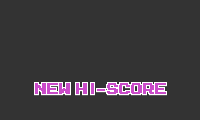
<style>
.page{position:relative;width:200px;height:120px;background:#333333}
.page>*{position:absolute;margin:0}
.t1{font:12px "MegaMan-2";color:#ca4bc9}
</style>
<div class="page">
<p class="t1" style="left:35px;top:83px;width:131px;height:11px">NEW HI-SCORE</p>
</div>
